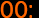
<style>
.page{position:relative;width:39px;height:18px;background:#000000}
.page>*{position:absolute;margin:0}
.t1{font:23.1px "Quicksand-Medium";color:#ff6600}
</style>
<div class="page">
<p class="t1" style="left:0px;top:1px;width:32px;height:17px">:00</p>
</div>
